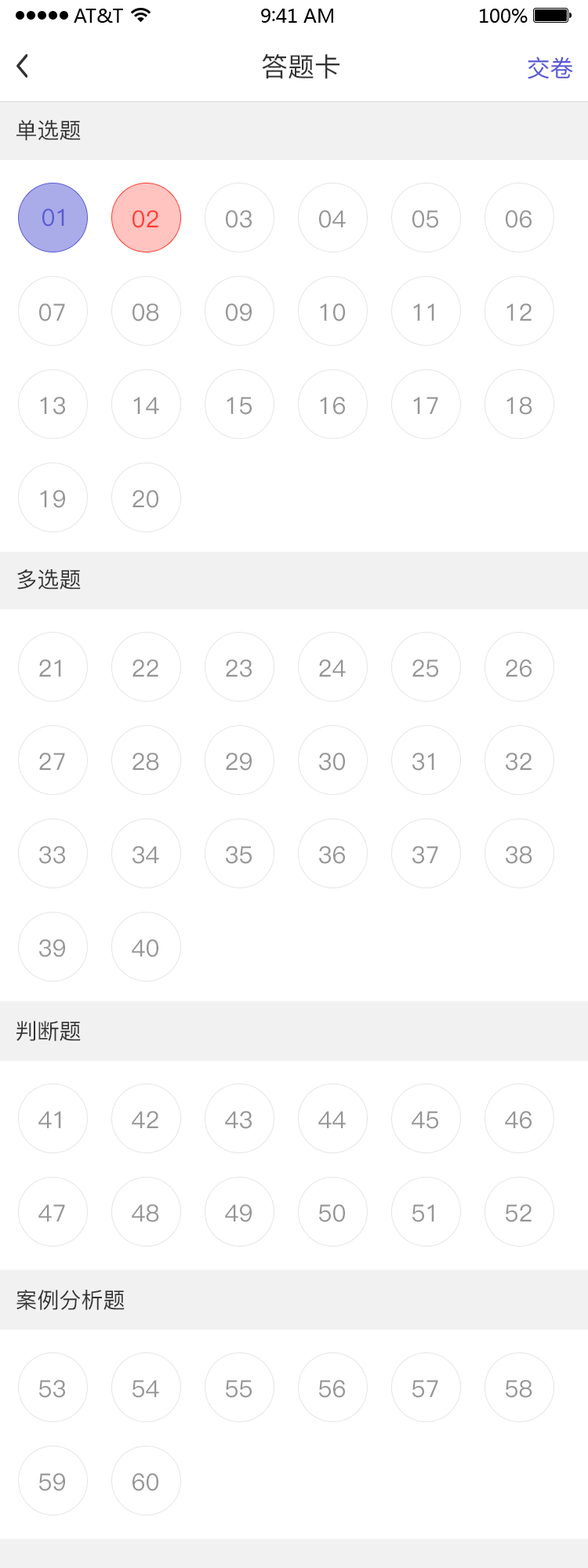
<style>
.page{position:relative;width:588px;height:1568px;background:#ffffff}
.page>*{position:absolute;margin:0}
.t1{font:26.7px "PingFang-SC-Medium";color:#333333}
.t2{font:23.5px "SourceHanSansCN-Regular";color:#595ad3}
.t3{font:22px "PingFang-SC-Medium";color:#333333}
.t4{font:23.5px "PingFang-SC-Medium";color:#595ad3}
.t5{font:23.5px "PingFang-SC-Medium";color:#ff3b30}
.t6{font:23.5px "PingFang-SC-Medium";color:#959595}
</style>
<div class="page">
<p class="t1" style="left:262px;top:54px;width:77px;height:25px">答题卡</p>
<p class="t2" style="left:528px;top:56px;width:45px;height:23px">交卷</p>
<p class="t3" style="left:16px;top:120px;width:65px;height:20px">单选题</p>
<p class="t4" style="left:42px;top:209px;width:22px;height:18px">01</p>
<p class="t5" style="left:132px;top:210px;width:26px;height:18px">02</p>
<p class="t6" style="left:226px;top:210px;width:26px;height:18px">03</p>
<p class="t6" style="left:319px;top:210px;width:27px;height:18px">04</p>
<p class="t6" style="left:412px;top:210px;width:26px;height:18px">05</p>
<p class="t6" style="left:506px;top:210px;width:26px;height:18px">06</p>
<p class="t6" style="left:39px;top:303px;width:26px;height:18px">07</p>
<p class="t6" style="left:132px;top:303px;width:27px;height:18px">08</p>
<p class="t6" style="left:226px;top:303px;width:26px;height:18px">09</p>
<p class="t6" style="left:320px;top:303px;width:25px;height:18px">10</p>
<p class="t6" style="left:413px;top:303px;width:21px;height:18px">11</p>
<p class="t6" style="left:506px;top:303px;width:26px;height:18px">12</p>
<p class="t6" style="left:40px;top:397px;width:25px;height:18px">13</p>
<p class="t6" style="left:133px;top:397px;width:26px;height:17px">14</p>
<p class="t6" style="left:227px;top:397px;width:25px;height:18px">15</p>
<p class="t6" style="left:320px;top:397px;width:25px;height:18px">16</p>
<p class="t6" style="left:413px;top:397px;width:25px;height:17px">17</p>
<p class="t6" style="left:506px;top:397px;width:26px;height:18px">18</p>
<p class="t6" style="left:40px;top:490px;width:25px;height:18px">19</p>
<p class="t6" style="left:132px;top:490px;width:26px;height:18px">20</p>
<p class="t3" style="left:17px;top:569px;width:64px;height:21px">多选题</p>
<p class="t6" style="left:39px;top:659px;width:22px;height:18px">21</p>
<p class="t6" style="left:132px;top:659px;width:26px;height:18px">22</p>
<p class="t6" style="left:226px;top:659px;width:26px;height:18px">23</p>
<p class="t6" style="left:319px;top:659px;width:27px;height:18px">24</p>
<p class="t6" style="left:412px;top:659px;width:26px;height:18px">25</p>
<p class="t6" style="left:506px;top:659px;width:26px;height:18px">26</p>
<p class="t6" style="left:39px;top:753px;width:26px;height:17px">27</p>
<p class="t6" style="left:132px;top:753px;width:27px;height:18px">28</p>
<p class="t6" style="left:226px;top:753px;width:26px;height:18px">29</p>
<p class="t6" style="left:319px;top:753px;width:26px;height:18px">30</p>
<p class="t6" style="left:412px;top:753px;width:22px;height:18px">31</p>
<p class="t6" style="left:506px;top:753px;width:26px;height:18px">32</p>
<p class="t6" style="left:39px;top:846px;width:26px;height:18px">33</p>
<p class="t6" style="left:132px;top:846px;width:27px;height:18px">34</p>
<p class="t6" style="left:226px;top:846px;width:26px;height:18px">35</p>
<p class="t6" style="left:319px;top:846px;width:26px;height:18px">36</p>
<p class="t6" style="left:412px;top:846px;width:26px;height:18px">37</p>
<p class="t6" style="left:506px;top:846px;width:26px;height:18px">38</p>
<p class="t6" style="left:39px;top:939px;width:26px;height:18px">39</p>
<p class="t6" style="left:132px;top:939px;width:26px;height:18px">40</p>
<p class="t3" style="left:16px;top:1021px;width:65px;height:20px">判断题</p>
<p class="t6" style="left:38px;top:1111px;width:23px;height:17px">41</p>
<p class="t6" style="left:132px;top:1111px;width:26px;height:17px">42</p>
<p class="t6" style="left:225px;top:1111px;width:27px;height:18px">43</p>
<p class="t6" style="left:318px;top:1111px;width:28px;height:17px">44</p>
<p class="t6" style="left:412px;top:1111px;width:26px;height:18px">45</p>
<p class="t6" style="left:505px;top:1111px;width:27px;height:18px">46</p>
<p class="t6" style="left:38px;top:1204px;width:27px;height:17px">47</p>
<p class="t6" style="left:132px;top:1204px;width:27px;height:18px">48</p>
<p class="t6" style="left:225px;top:1204px;width:27px;height:18px">49</p>
<p class="t6" style="left:319px;top:1204px;width:26px;height:18px">50</p>
<p class="t6" style="left:412px;top:1204px;width:22px;height:18px">51</p>
<p class="t6" style="left:506px;top:1204px;width:26px;height:18px">52</p>
<p class="t3" style="left:16px;top:1290px;width:109px;height:20px">案例分析题</p>
<p class="t6" style="left:39px;top:1380px;width:26px;height:18px">53</p>
<p class="t6" style="left:132px;top:1380px;width:27px;height:18px">54</p>
<p class="t6" style="left:226px;top:1380px;width:26px;height:18px">55</p>
<p class="t6" style="left:319px;top:1380px;width:26px;height:18px">56</p>
<p class="t6" style="left:412px;top:1380px;width:26px;height:18px">57</p>
<p class="t6" style="left:506px;top:1380px;width:26px;height:18px">58</p>
<p class="t6" style="left:39px;top:1473px;width:26px;height:18px">59</p>
<p class="t6" style="left:132px;top:1473px;width:26px;height:18px">60</p>
</div>
